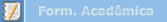
<style>
.page{position:relative;width:167px;height:22px;background:#8fbee8}
.page>*{position:absolute;margin:0}
.t1{font:12px "Verdana-Bold";color:#d2e3e8}
</style>
<div class="page">
<p class="t1" style="left:39px;top:5px;width:114px;height:11px">Form. Acadêmica</p>
</div>
